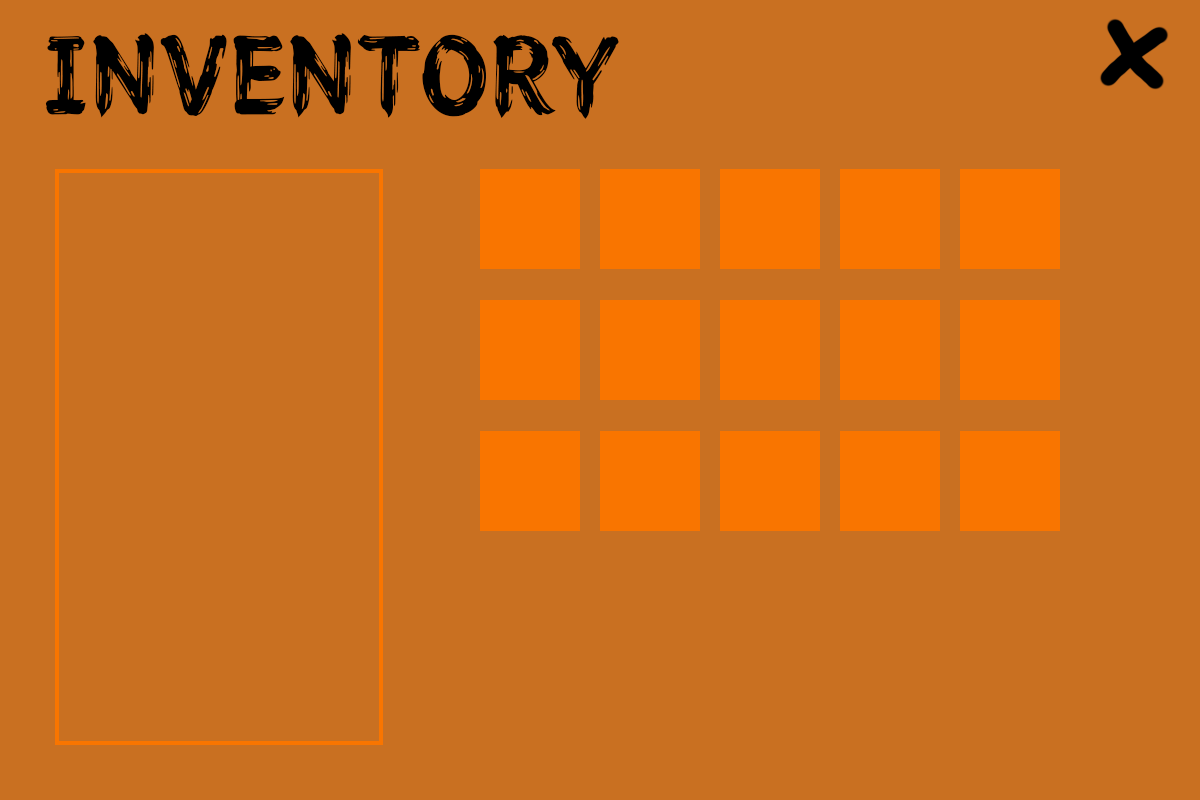
<style>
.page{position:relative;width:1200px;height:800px;background:#c97021}
.page>*{position:absolute;margin:0}
.t1{font:109px "BMEuljiro10yearslater";color:#000000}
</style>
<div class="page">
<p class="t1" style="left:45px;top:33px;width:574px;height:86px">INVENTORY</p>
</div>
